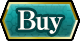
<style>
.page{position:relative;width:80px;height:41px}
.page>*{position:absolute;margin:0}
.t1{font:26px "RyuminPro-ExBold";letter-spacing:-0.04em;color:#fffffa}
</style>
<div class="page">
<p class="t1" style="left:18px;top:10px;width:45px;height:24px">Buy</p>
</div>
